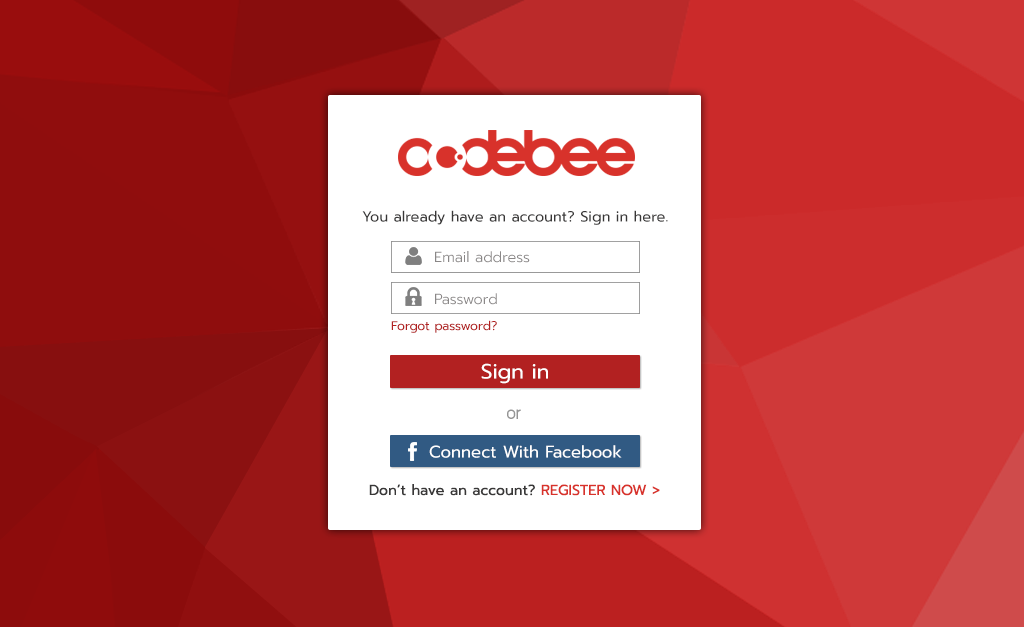
<style>
.page{position:relative;width:1024px;height:627px;background:#ffffff}
.page>*{position:absolute;margin:0}
.t1{font:14.6px "Prompt-Regular";color:#383737}
.t2{font:14.6px "Prompt-Light";color:#8a8787}
.t3{font:12.5px "Prompt-Regular";color:#b22121}
.t4{font:20.8px "Prompt-Regular";color:#ffffff}
.t5{font:20.8px "supermarket";color:#959595}
.t6{font:16.7px "Prompt-Regular";color:#ffffff}
.t7{font:14.6px "Prompt-Regular";color:#d8322b}
</style>
<div class="page">
<p class="t1" style="left:362px;top:210px;width:306px;height:15px">You already have an account? Sign in here.</p>
<p class="t2" style="left:435px;top:251px;width:95px;height:12px">Email address</p>
<p class="t2" style="left:435px;top:293px;width:62px;height:12px">Password</p>
<p class="t3" style="left:391px;top:320px;width:106px;height:13px">Forgot password?</p>
<p class="t4" style="left:481px;top:363px;width:67px;height:21px">Sign in</p>
<p class="t5" style="left:507px;top:409px;width:14px;height:10px">or</p>
<p class="t6" style="left:429px;top:445px;width:193px;height:13px">Connect With Facebook</p>
<p class="t1" style="left:369px;top:484px;width:291px;height:12px">Don’t have an account?<span class="t7"> REGISTER NOW &gt;</span></p>
</div>
